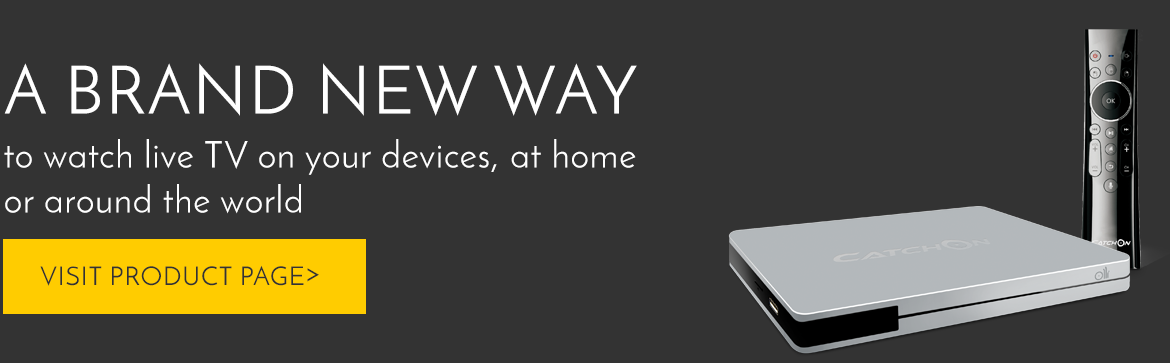
<style>
.page{position:relative;width:1170px;height:363px;background:#333333}
.page>*{position:absolute;margin:0}
.t1{font:67px "JosefinSans";letter-spacing:0.025em;color:#ffffff}
.t2{font:37px/45px "JosefinSans";letter-spacing:0.025em;color:#ffffff}
.t3{font:26.1px "JosefinSans";letter-spacing:0.025em;color:#333333}
</style>
<div class="page">
<p class="t1" style="left:4px;top:63px;width:633px;height:53px">A BRAND NEW WAY</p>
<p class="t2" style="left:4px;top:139px;width:632px;height:75px">to watch live TV on your devices, at home<br>or around the world</p>
<p class="t3" style="left:40px;top:265px;width:279px;height:21px">VISIT PRODUCT PAGE&gt;</p>
</div>
